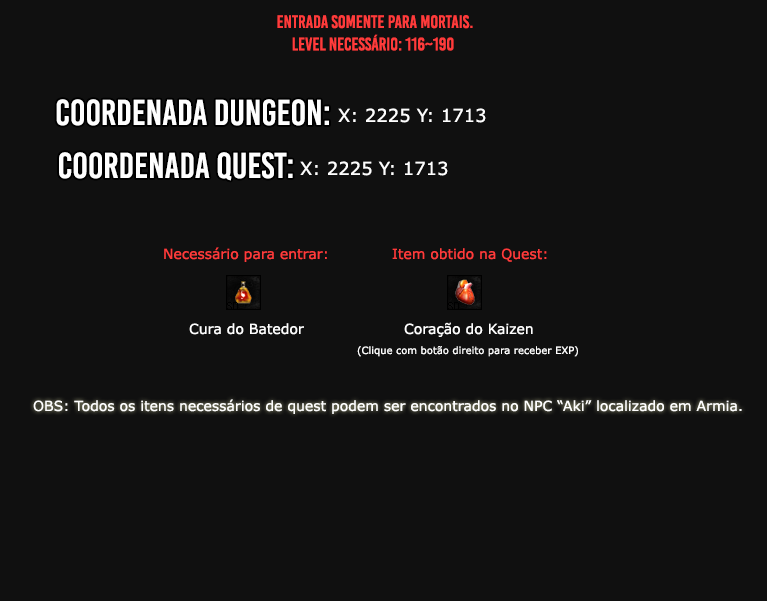
<style>
.page{position:relative;width:767px;height:601px;background:#101010}
.page>*{position:absolute;margin:0}
.t1{font:18px "BebasKai";color:#ff3b3b}
.t2{font:36px "BebasKai";color:#fefefe}
.t3{font:18px "Verdana";color:#fefefe}
.t4{font:14px "Verdana";color:#ff3b3b}
.t5{font:14px "Verdana";color:#fefefe}
.t6{font:10px "Verdana";color:#fefefe}
</style>
<div class="page">
<p class="t1" style="left:277px;top:15px;width:196px;height:14px">Entrada somente para mortais.</p>
<p class="t1" style="left:292px;top:34px;width:162px;height:17px">level necessário: 116~190</p>
<p class="t2" style="left:56px;top:99px;width:273px;height:27px">Coordenada dungeon:</p>
<p class="t3" style="left:338px;top:108px;width:148px;height:15px">X: 2225 Y: 1713</p>
<p class="t2" style="left:59px;top:152px;width:234px;height:29px">Coordenada quest:</p>
<p class="t3" style="left:300px;top:161px;width:148px;height:15px">X: 2225 Y: 1713</p>
<p class="t4" style="left:164px;top:247px;width:163px;height:15px">Necessário para entrar:</p>
<p class="t4" style="left:392px;top:248px;width:155px;height:14px">Item obtido na Quest:</p>
<p class="t5" style="left:189px;top:323px;width:115px;height:12px">Cura do Batedor</p>
<p class="t5" style="left:404px;top:322px;width:129px;height:15px">Coração do Kaizen</p>
<p class="t6" style="left:357px;top:346px;width:221px;height:11px">(Clique com botão direito para receber EXP)</p>
<p class="t5" style="left:33px;top:399px;width:709px;height:15px">OBS: Todos os itens necessários de quest podem ser encontrados no NPC “Aki” localizado em Armia.</p>
</div>
